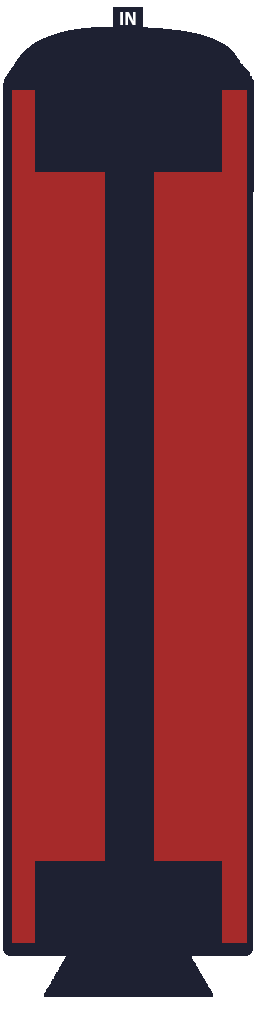
<style>
.page{position:relative;width:256px;height:1024px;background:#a62a2a}
.page>*{position:absolute;margin:0}
.t1{font:18px "MyriadPro-Bold";color:#ffffff}
</style>
<div class="page">
<p class="t1" style="left:120px;top:12px;width:16px;height:13px">IN</p>
</div>
